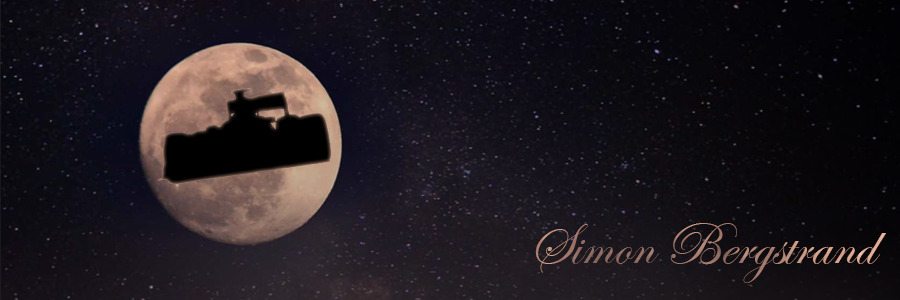
<style>
.page{position:relative;width:900px;height:300px}
.page>*{position:absolute;margin:0}
.t1{font:60px "EdwardianScriptITC"}
</style>
<div class="page">
<p class="t1" style="left:535px;top:223px;width:351px;height:60px">Simon Bergstrand</p>
</div>
